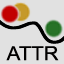
<style>
.page{position:relative;width:64px;height:64px;background:#e1e1e1}
.page>*{position:absolute;margin:0}
.t1{font:19.3px "ArialMT";color:#010000;scale:1.06 1}
</style>
<div class="page">
<p class="t1" style="left:6px;top:46px;width:53px;height:15px">ATTR</p>
</div>
